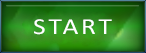
<style>
.page{position:relative;width:146px;height:53px}
.page>*{position:absolute;margin:0}
.t1{font:23px "Calibri";letter-spacing:0.1em;color:#ffffff;scale:1.2 1}
</style>
<div class="page">
<p class="t1" style="left:34px;top:19px;width:78px;height:16px">START</p>
</div>
